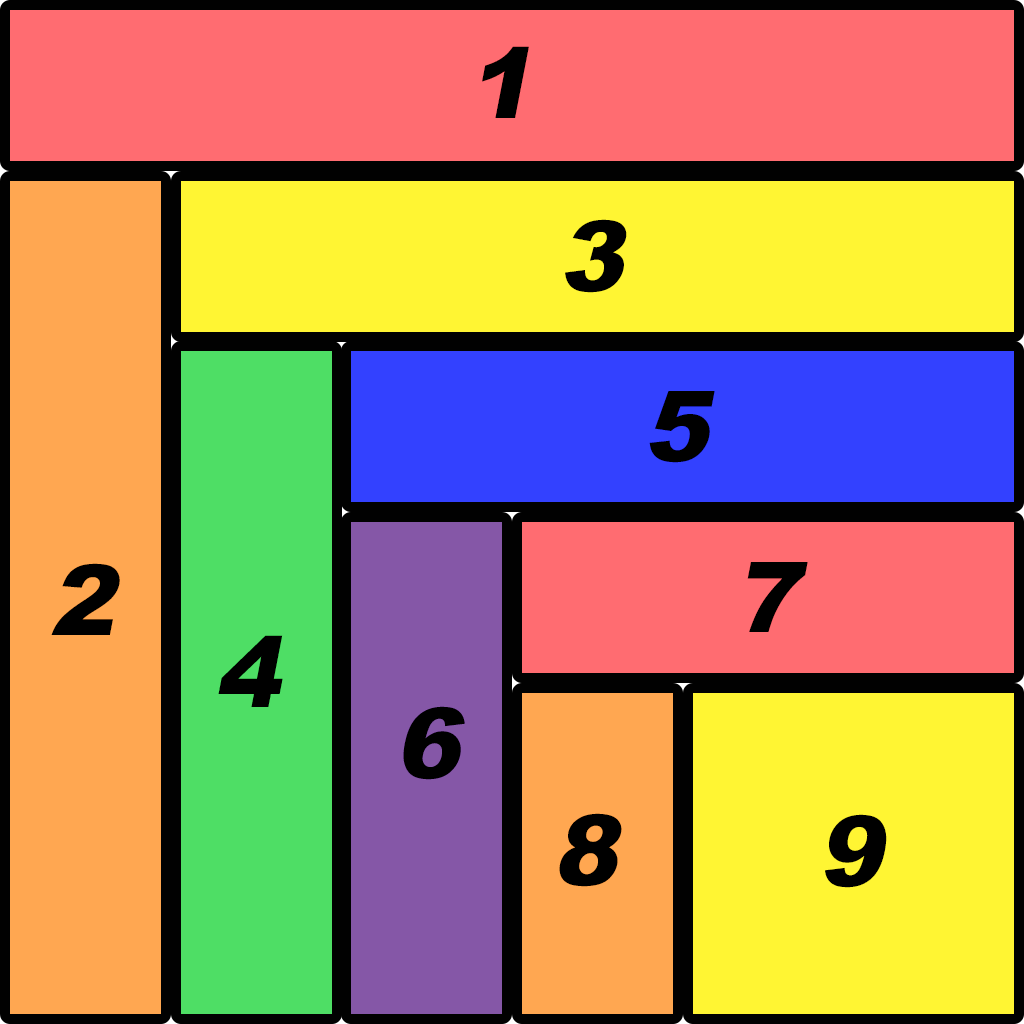
<style>
.page{position:relative;width:1024px;height:1024px;background:#fff533}
.page>*{position:absolute;margin:0}
.t1{font:97.6px "Arial-Black";color:#000000;font-style:italic}
</style>
<div class="page">
<p class="t1" style="left:482px;top:46px;width:47px;height:72px">1</p>
<p class="t1" style="left:565px;top:219px;width:62px;height:74px">3</p>
<p class="t1" style="left:649px;top:391px;width:66px;height:72px">5</p>
<p class="t1" style="left:51px;top:563px;width:69px;height:72px">2</p>
<p class="t1" style="left:747px;top:562px;width:61px;height:70px">7</p>
<p class="t1" style="left:218px;top:635px;width:65px;height:72px">4</p>
<p class="t1" style="left:403px;top:706px;width:62px;height:74px">6</p>
<p class="t1" style="left:559px;top:813px;width:63px;height:74px">8</p>
<p class="t1" style="left:825px;top:814px;width:62px;height:74px">9</p>
</div>
